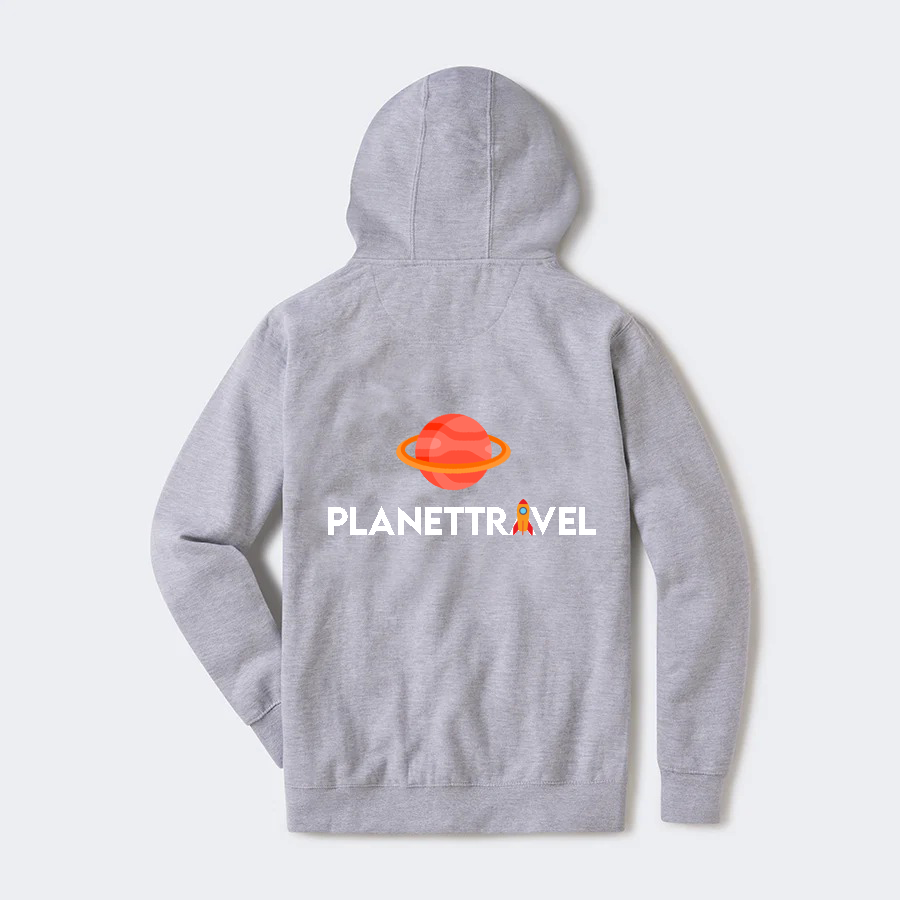
<style>
.page{position:relative;width:900px;height:900px;background:#edeef2}
.page>*{position:absolute;margin:0}
.t1{font:35.1px "LEMONMILK-Medium";color:#ffffff}
</style>
<div class="page">
<p class="t1" style="left:328px;top:506px;width:268px;height:29px">PlanetTravel</p>
</div>
